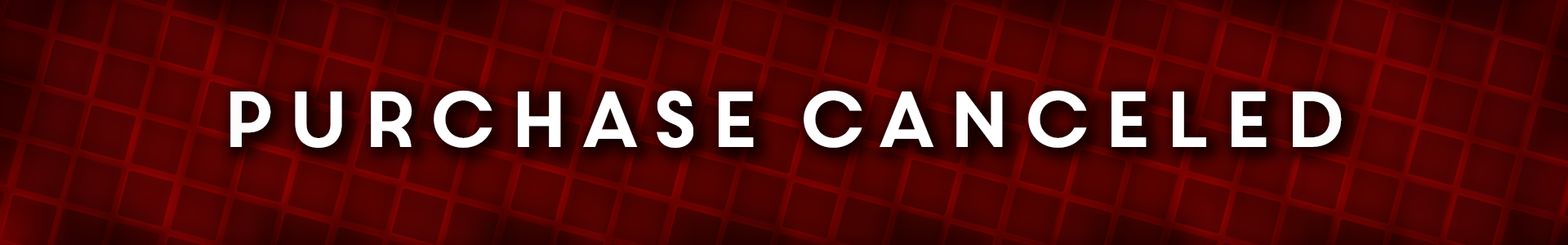
<style>
.page{position:relative;width:1568px;height:245px}
.page>*{position:absolute;margin:0}
.t1{font:79px "CoreCircus";color:#ffffff}
</style>
<div class="page">
<p class="t1" style="left:230px;top:91px;width:1112px;height:57px">Purchase canceled</p>
</div>
